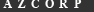
<style>
.page{position:relative;width:94px;height:12px;background:#333333}
.page>*{position:absolute;margin:0}
.t1{font:12px "TimesNewRomanPS-BoldMT";color:#fcfefc}
</style>
<div class="page">
<p class="t1" style="left:3px;top:0px;width:10px;height:8px">A</p>
<p class="t1" style="left:17px;top:0px;width:9px;height:8px">Z</p>
<p class="t1" style="left:31px;top:0px;width:9px;height:8px">C</p>
<p class="t1" style="left:45px;top:0px;width:9px;height:8px">O</p>
<p class="t1" style="left:59px;top:0px;width:9px;height:8px">R</p>
<p class="t1" style="left:74px;top:0px;width:8px;height:8px">P</p>
</div>
